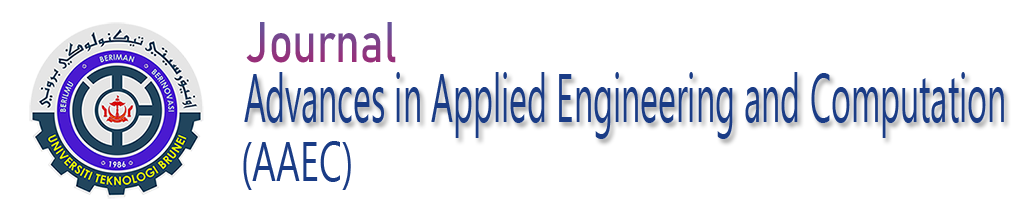
<style>
.page{position:relative;width:1031px;height:212px;background:#ffffff}
.page>*{position:absolute;margin:0}
.t1{font:56.2px "Bahnschrift";color:#873b84;scale:0.79 1}
.t2{font:67.8px "NirmalaUI";color:#1a3c86;scale:0.5 1}
.t3{font:55.2px "NirmalaUI";color:#1a3c86;scale:0.67 1}
</style>
<div class="page">
<p class="t1" style="left:246px;top:22px;width:150px;height:41px">Journal</p>
<p class="t2" style="left:244px;top:72px;width:760px;height:67px">Advances in Applied Engineering and Computation</p>
<p class="t3" style="left:243px;top:141px;width:108px;height:49px">(AAEC)</p>
</div>
